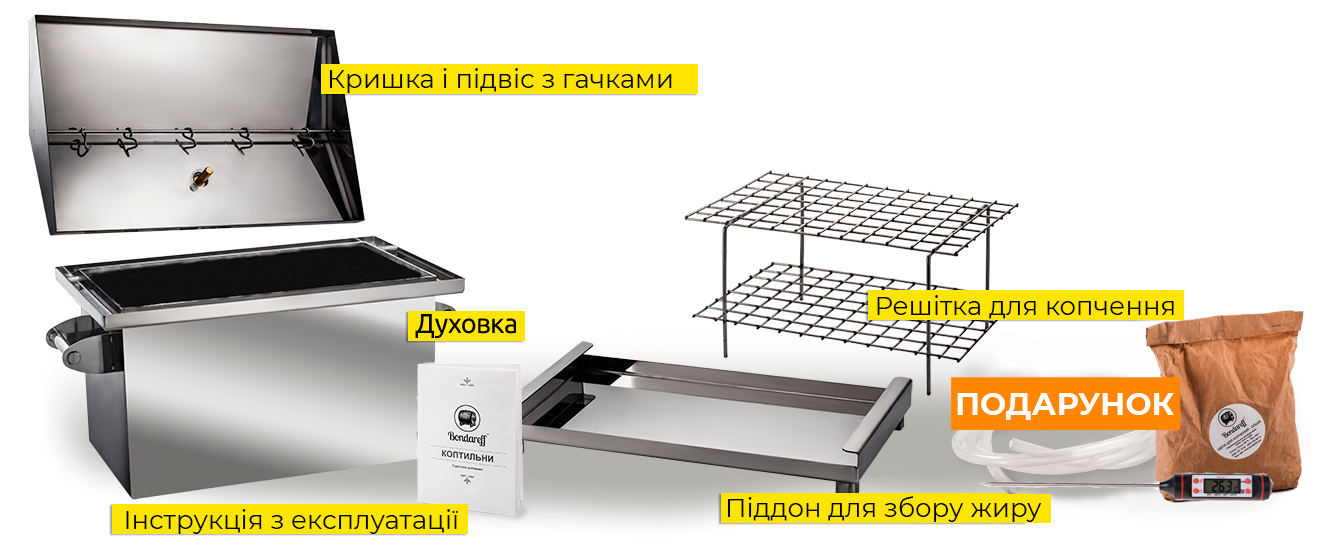
<style>
.page{position:relative;width:1325px;height:549px;background:#ffffff}
.page>*{position:absolute;margin:0}
.t1{font:26px "Montserrat-Regular";color:#000000}
.t2{font:31px "Montserrat-Bold";color:#ffffff}
</style>
<div class="page">
<p class="t1" style="left:329px;top:68px;width:343px;height:25px">Кришка і підвіс з гачками</p>
<p class="t1" style="left:877px;top:295px;width:297px;height:24px">Решітка для копчення</p>
<p class="t2" style="left:957px;top:393px;width:217px;height:27px">ПОДАРУНОК</p>
<p class="t1" style="left:727px;top:496px;width:315px;height:26px">Піддон для збору жиру</p>
<p class="t1" style="left:126px;top:509px;width:332px;height:25px">Інструкція з експлуатації</p>
</div>
